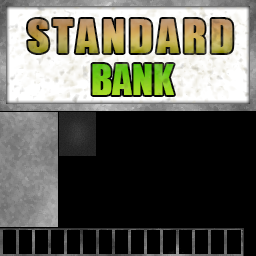
<style>
.page{position:relative;width:256px;height:256px;background:#000000}
.page>*{position:absolute;margin:0}
.t1{font:43.2px "Impact";letter-spacing:0.1em}
.t2{font:39.2px "Impact"}
</style>
<div class="page">
<p class="t1" style="left:28px;top:19px;width:205px;height:34px">STANDARD</p>
<p class="t2" style="left:92px;top:64px;width:82px;height:31px">BANK</p>
</div>
